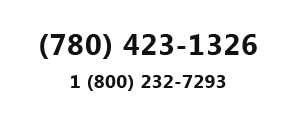
<style>
.page{position:relative;width:300px;height:130px;background:#ffffff}
.page>*{position:absolute;margin:0}
.t1{font:29.3px "MicrosoftTaiLe-Bold";letter-spacing:0.025em;color:#111111}
.t2{font:18.7px "MicrosoftTaiLe-Bold";letter-spacing:0.025em;color:#111111}
</style>
<div class="page">
<p class="t1" style="left:40px;top:34px;width:217px;height:25px">(780) 423-1326</p>
<p class="t2" style="left:71px;top:75px;width:155px;height:16px">1 (800) 232-7293</p>
</div>
